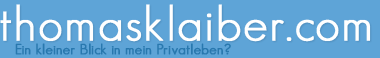
<style>
.page{position:relative;width:380px;height:58px;background:#5ea4d7}
.page>*{position:absolute;margin:0}
.t1{font:48px "GeosansLight";letter-spacing:0.025em;color:#ffffff;font-weight:bold}
.t2{font:14px "GeosansLight";letter-spacing:0.025em;color:#2978ae;font-weight:bold}
</style>
<div class="page">
<p class="t1" style="left:0px;top:4px;width:371px;height:38px">thomasklaiber.com</p>
<p class="t2" style="left:15px;top:43px;width:216px;height:12px">Ein kleiner Blick in mein Privatleben?</p>
</div>
